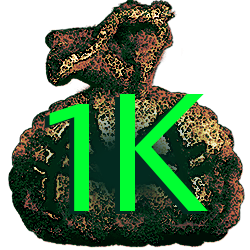
<style>
.page{position:relative;width:250px;height:250px;background:#ffffff}
.page>*{position:absolute;margin:0}
.t1{font:155.2px "BerninaSans";color:#00ff32}
</style>
<div class="page">
<p class="t1" style="left:49px;top:94px;width:159px;height:117px">1K</p>
</div>
